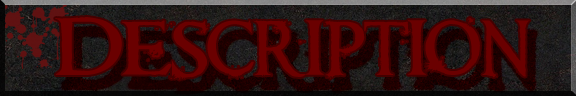
<style>
.page{position:relative;width:576px;height:96px}
.page>*{position:absolute;margin:0}
.t1{font:80px "ZPSRequiem";color:#6a0000}
</style>
<div class="page">
<p class="t1" style="left:55px;top:17px;width:475px;height:63px">Description</p>
</div>
